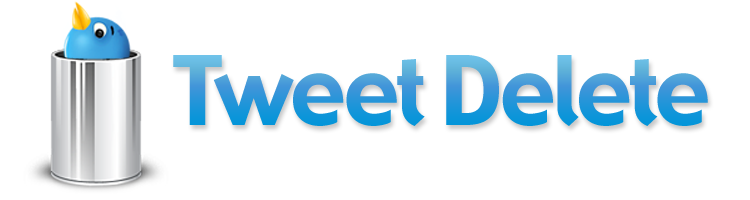
<style>
.page{position:relative;width:750px;height:200px;background:#ffffff}
.page>*{position:absolute;margin:0}
.t1{font:160px "GadgetRegular";letter-spacing:-0.01em}
</style>
<div class="page">
<p class="t1" style="left:173px;top:55px;width:535px;height:71px">Tweet Delete</p>
</div>
